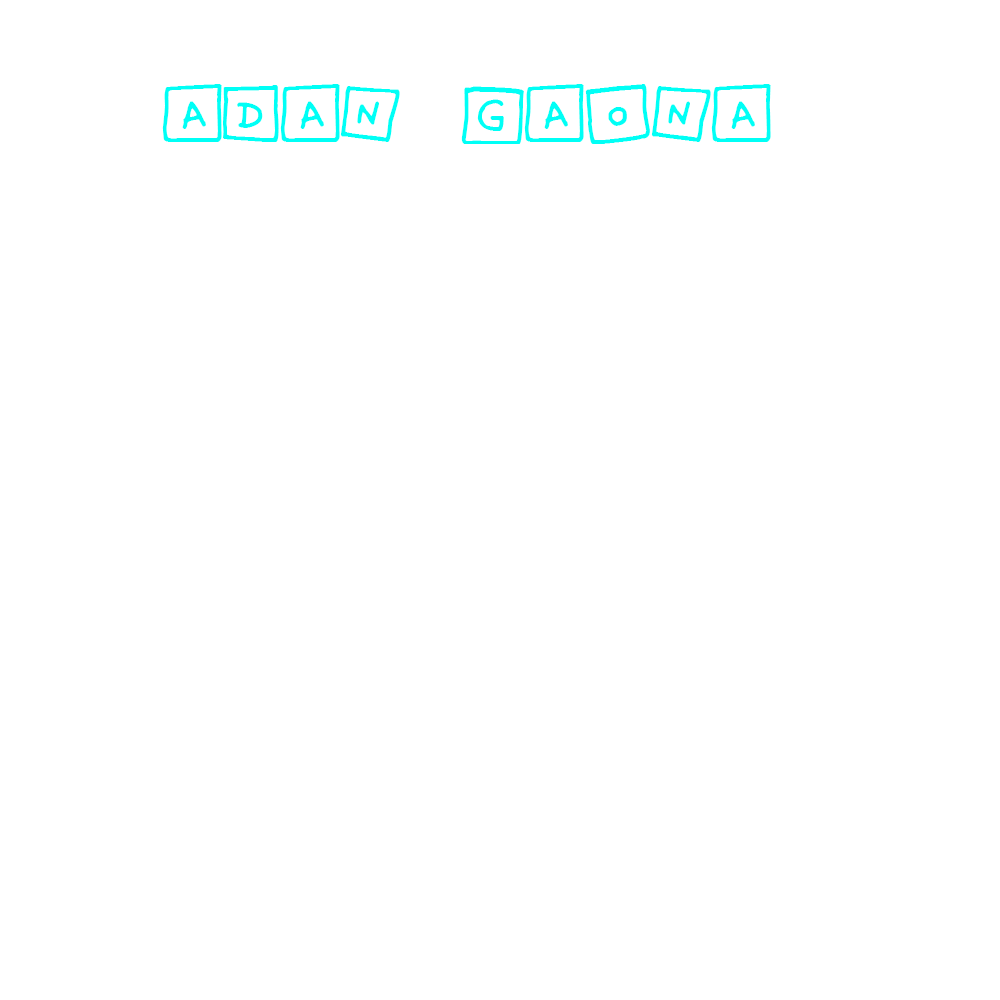
<style>
.page{position:relative;width:1000px;height:1000px;background:#ffffff}
.page>*{position:absolute;margin:0}
.t1{font:75px "CuteNotes";color:#00fff6}
</style>
<div class="page">
<p class="t1" style="left:162px;top:84px;width:609px;height:60px">adan gaona</p>
</div>
